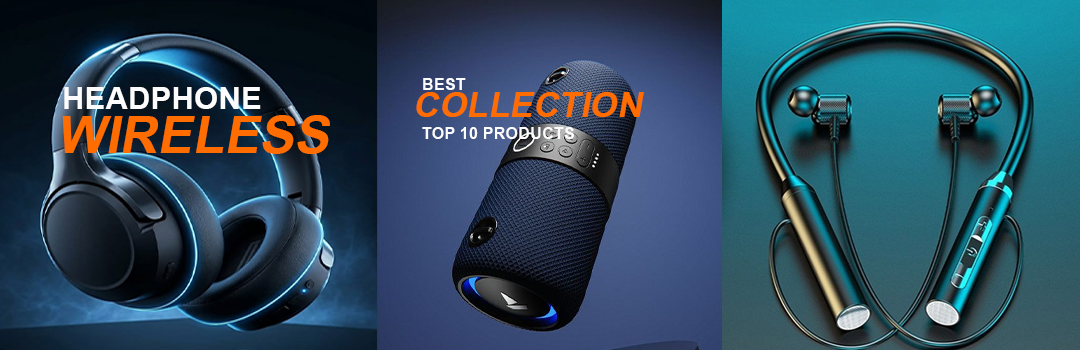
<style>
.page{position:relative;width:1080px;height:350px}
.page>*{position:absolute;margin:0}
.t1{font:16.5px "Arial-BoldMT";color:#fdfcfc}
.t2{font:31.3px "Arial-BoldMT";color:#fdfcfc}
.t3{font:35.7px "Arial-BoldMT";color:#ff6c00}
.t4{font:53.1px "Arial-BoldMT";color:#ff6c00}
</style>
<div class="page">
<p class="t1" style="left:423px;top:78px;width:43px;height:12px">BEST</p>
<p class="t2" style="left:64px;top:87px;width:197px;height:22px">HEADPHONE</p>
<p class="t3" style="left:416px;top:92px;width:228px;height:25px">COLLECTION</p>
<p class="t4" style="left:62px;top:115px;width:268px;height:39px">WIRELESS</p>
<p class="t1" style="left:422px;top:127px;width:152px;height:12px">TOP 10 PRODUCTS</p>
</div>
